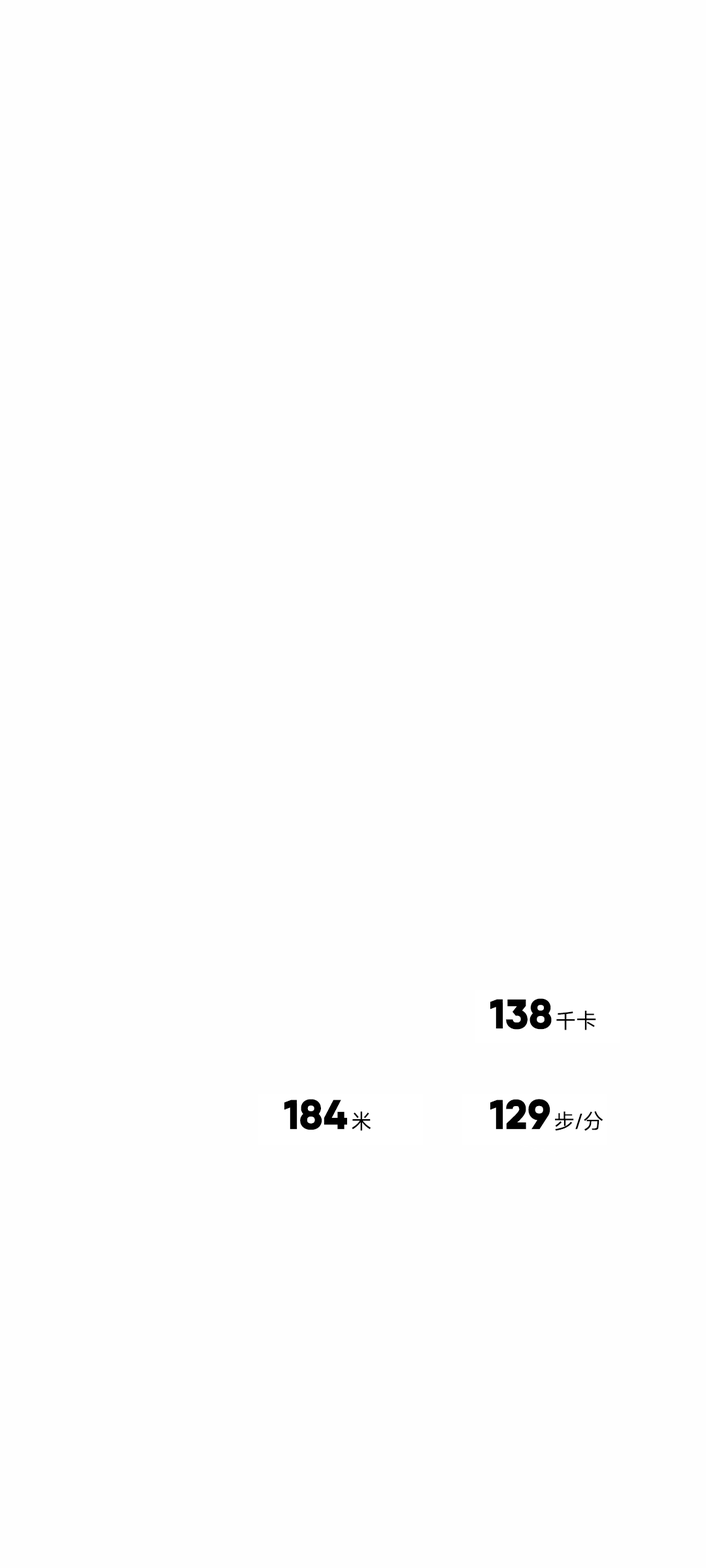
<style>
.page{position:relative;width:706px;height:1568px;background:#fefefe}
.page>*{position:absolute;margin:0}
.t1{font:41.4px "KeepSans-ExtraBold";color:#000000}
.t2{font:20.9px "MiSans-Normal";color:#000000}
</style>
<div class="page">
<p class="t1" style="left:490px;top:998px;width:61px;height:32px">138</p>
<p class="t2" style="left:556px;top:1011px;width:40px;height:19px">千卡</p>
<p class="t1" style="left:284px;top:1099px;width:63px;height:31px">184</p>
<p class="t1" style="left:490px;top:1099px;width:60px;height:31px">129</p>
<p class="t2" style="left:351px;top:1111px;width:19px;height:20px">米</p>
<p class="t2" style="left:555px;top:1111px;width:47px;height:20px">步/分</p>
</div>
